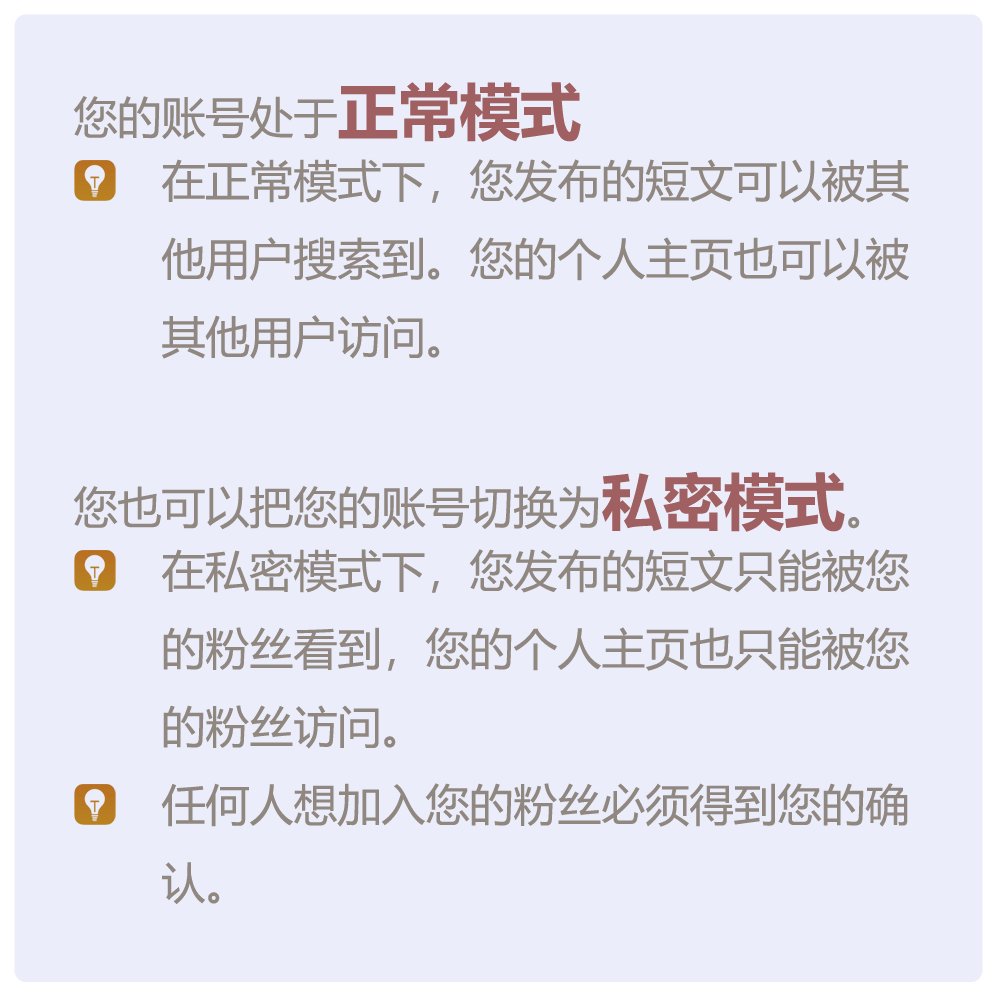
<style>
.page{position:relative;width:1000px;height:1000px;background:#ebeefa}
.page>*{position:absolute;margin:0}
.t1{font:44px/78px "MicrosoftYaHei";color:#908781}
.t2{font:61px/78px "MicrosoftYaHei-Bold";color:#a05f60}
.t3{font:44px/78px "SimSun";color:#908781}
</style>
<div class="page">
<p class="t1" style="left:73px;top:82px;width:837px;height:822px">您的账号处于<span class="t2">正常模式<br></span><span class="t3">◼◼</span>在正常模式下，您发布的短文可以被其<br><span class="t3">◼◼</span>他用户搜索到。您的个人主页也可以被<br><span class="t3">◼◼</span>其他用户访问。<br><br>您也可以把您的账号切换为<span class="t2">私密模式</span>。<br><span class="t3">◼◼</span>在私密模式下，您发布的短文只能被您<br><span class="t3">◼◼</span>的粉丝看到，您的个人主页也只能被您<br><span class="t3">◼◼</span>的粉丝访问。<br><span class="t3">◼◼</span>任何人想加入您的粉丝必须得到您的确<br><span class="t3">◼◼</span>认。</p>
</div>
